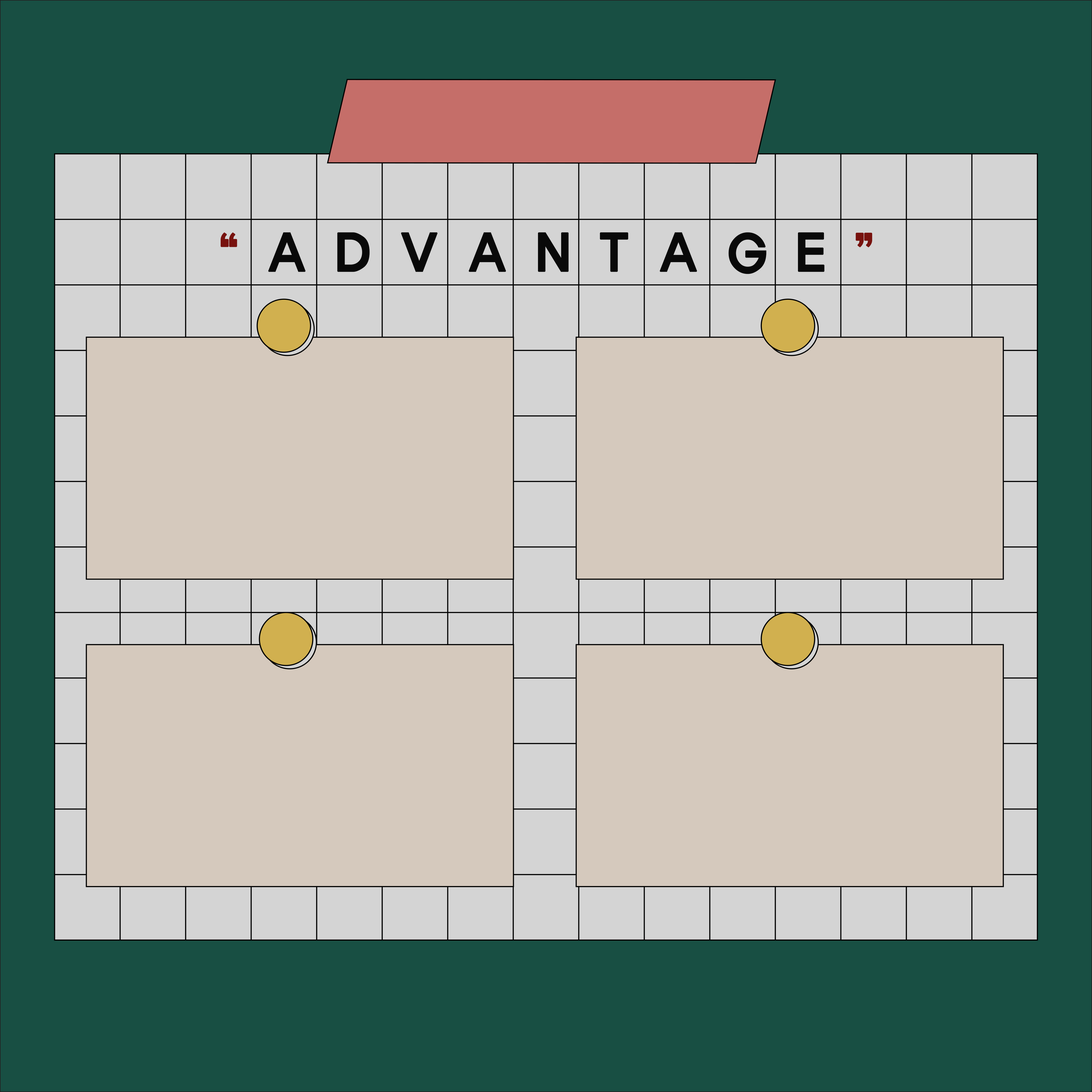
<style>
.page{position:relative;width:1092px;height:1092px;background:#d5c9bd}
.page>*{position:absolute;margin:0}
.t1{font:49.1px "ExpoM-HM";letter-spacing:0.5em;color:#78120e;text-transform:uppercase;font-weight:bold;scale:0.9 1}
.t2{font:49.1px "ExpoM-HM";letter-spacing:0.5em;color:#090909;text-transform:uppercase;font-weight:bold;scale:0.9 1}
</style>
<div class="page">
<p class="t1" style="left:220px;top:232px;width:17px;height:15px">“</p>
<p class="t2" style="left:268px;top:232px;width:38px;height:40px">a</p>
<p class="t2" style="left:337px;top:232px;width:33px;height:40px">d</p>
<p class="t2" style="left:401px;top:232px;width:37px;height:40px">v</p>
<p class="t2" style="left:469px;top:232px;width:37px;height:40px">a</p>
<p class="t2" style="left:538px;top:232px;width:31px;height:40px">n</p>
<p class="t2" style="left:600px;top:232px;width:28px;height:40px">t</p>
<p class="t2" style="left:660px;top:232px;width:37px;height:40px">a</p>
<p class="t2" style="left:729px;top:232px;width:38px;height:42px">g</p>
<p class="t2" style="left:798px;top:232px;width:26px;height:40px">e</p>
<p class="t1" style="left:856px;top:233px;width:16px;height:14px">”</p>
</div>
